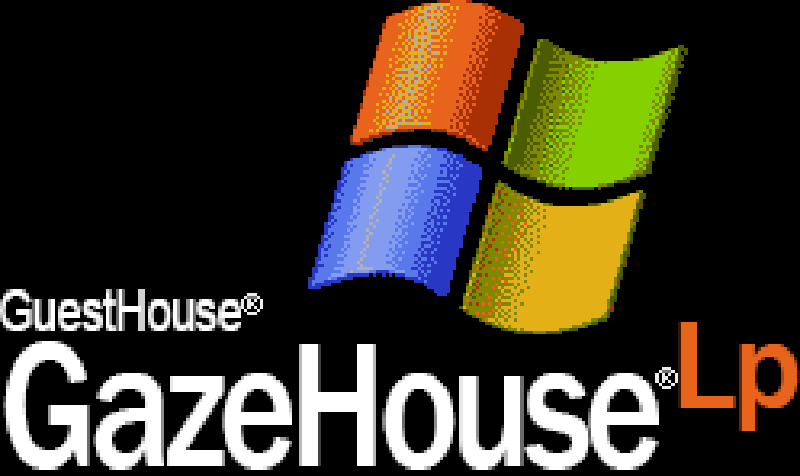
<style>
.page{position:relative;width:800px;height:476px;background:#000000}
.page>*{position:absolute;margin:0}
.t1{font:57.9px "ArialMT";letter-spacing:0.005em;color:#ffffff;scale:0.75 1}
.t2{font:128.6px "FranklinGothic-Medium";letter-spacing:-0.025em;color:#e8641c}
.t3{font:183.3px "FranklinGothic-Medium";letter-spacing:-0.05em;color:#ffffff;scale:0.82 1}
</style>
<div class="page">
<p class="t1" style="left:0px;top:290px;width:239px;height:44px">GuestHouse</p>
<p class="t2" style="left:681px;top:321px;width:117px;height:108px">Lp</p>
<p class="t3" style="left:5px;top:342px;width:653px;height:126px">GazeHouse</p>
</div>
